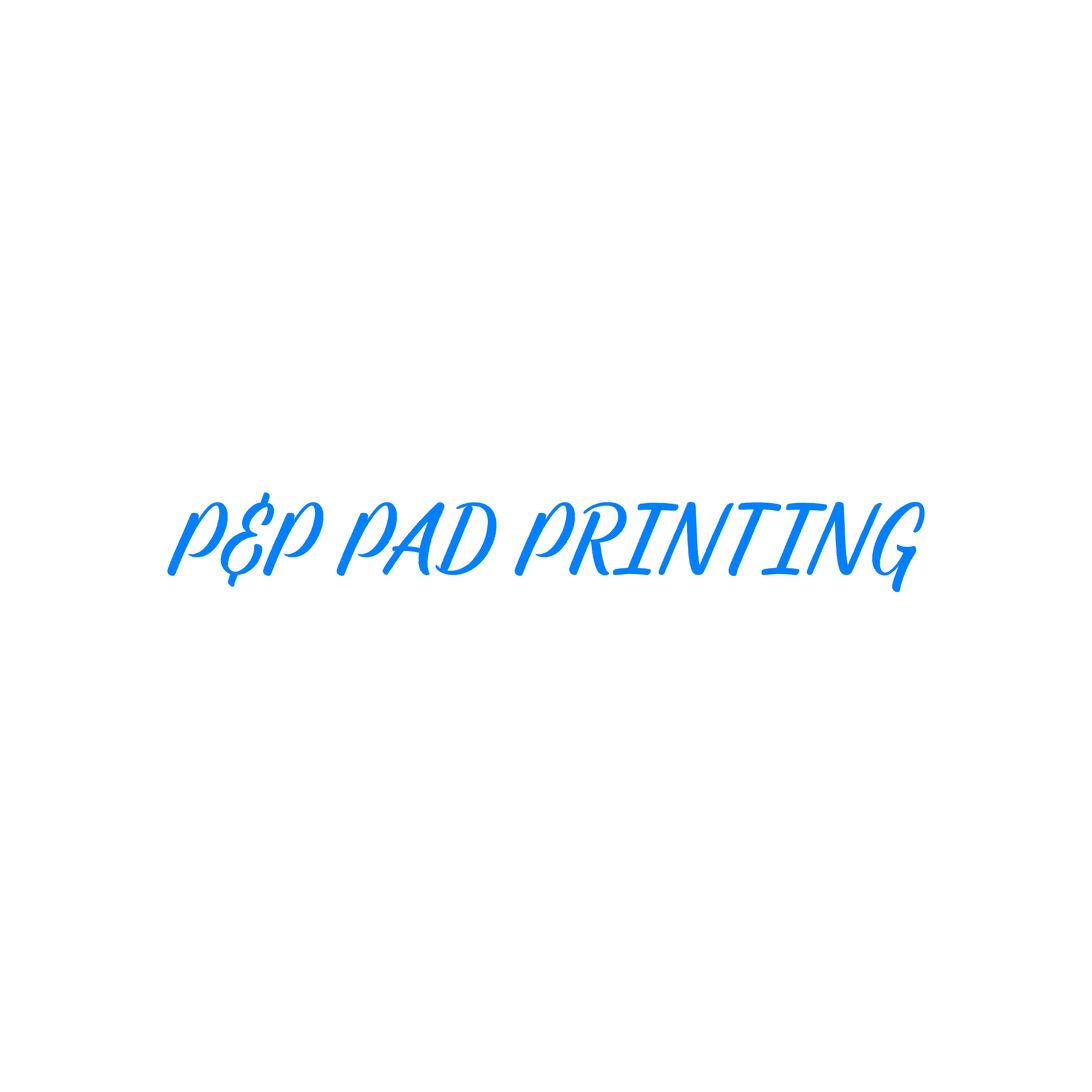
<style>
.page{position:relative;width:1092px;height:1092px;background:#ffffff}
.page>*{position:absolute;margin:0}
.t1{font:103.4px "FSSheptonWeb-Regular";color:#0080ff}
</style>
<div class="page">
<p class="t1" style="left:167px;top:492px;width:758px;height:100px">P&amp;P PAD PRINTING</p>
</div>
